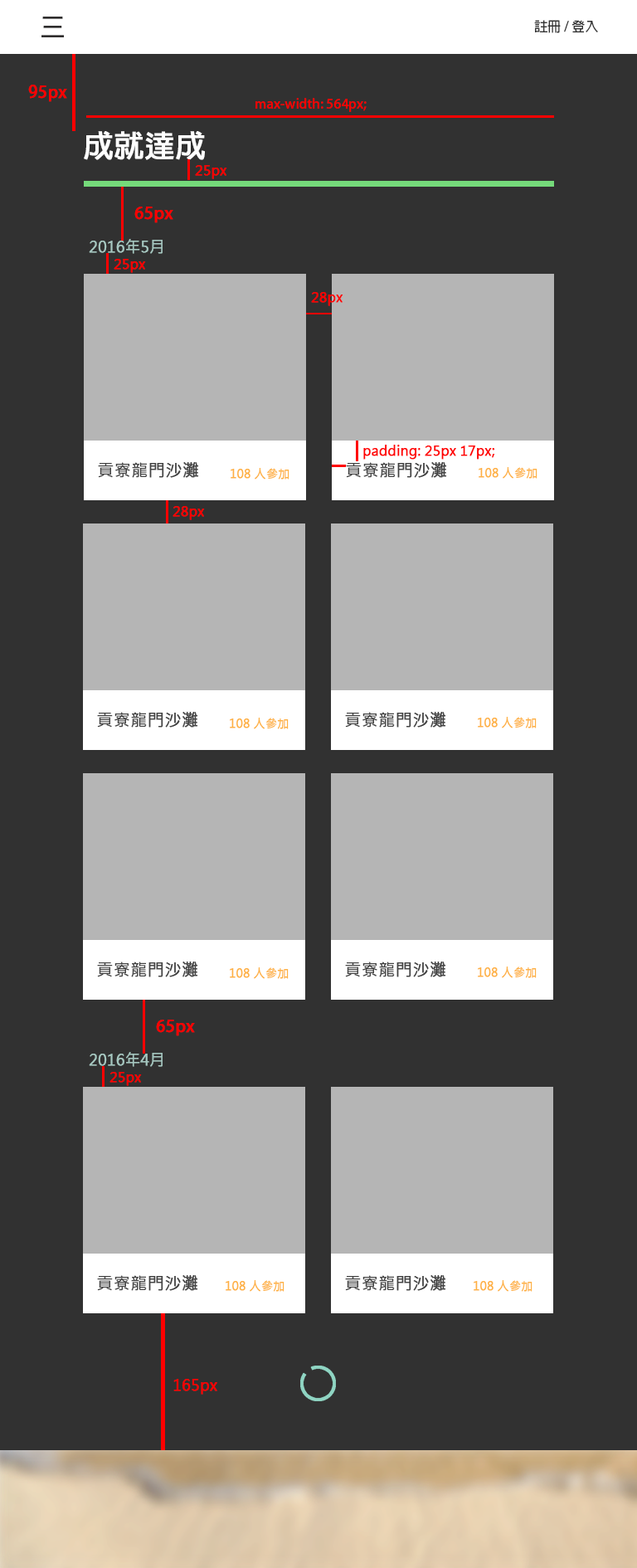
<style>
.page{position:relative;width:637px;height:1568px;background:#313131}
.page>*{position:absolute;margin:0}
.t1{font:24.9px "AdobeFanHeitiStd-Bold";color:#2e2c2c}
.t2{font:13.3px "AdobeFanHeitiStd-Bold";color:#333333}
.t3{font:16.6px "AdobeFanHeitiStd-Bold";color:#ff0000;font-weight:bold}
.t4{font:13.3px "AdobeFanHeitiStd-Bold";color:#ff0000}
.t5{font:29.9px "AdobeFanHeitiStd-Bold";color:#ffffff;font-weight:bold}
.t6{font:13.3px "MicrosoftJhengHeiRegular";color:#ff0000;font-weight:bold}
.t7{font:14.9px "MicrosoftJhengHeiRegular";color:#a6c7c0;font-weight:bold}
.t8{font:16.6px "MicrosoftJhengHeiRegular";color:#424242;font-weight:bold}
.t9{font:11.6px "MicrosoftJhengHeiRegular";color:#feb143;font-weight:bold}
.t10{font:14.9px "MicrosoftJhengHeiRegular";color:#ff0000;font-weight:bold}
</style>
<div class="page">
<p class="t1" style="left:41px;top:17px;width:23px;height:20px">三</p>
<p class="t2" style="left:534px;top:20px;width:64px;height:13px">註冊 / 登入</p>
<p class="t3" style="left:28px;top:85px;width:39px;height:17px">95px</p>
<p class="t4" style="left:256px;top:98px;width:111px;height:14px">max-width: 564px;</p>
<p class="t5" style="left:84px;top:131px;width:121px;height:29px">成就達成</p>
<p class="t6" style="left:195px;top:165px;width:32px;height:14px">25px</p>
<p class="t3" style="left:134px;top:207px;width:39px;height:16px">65px</p>
<p class="t7" style="left:89px;top:239px;width:74px;height:15px">2016年5月</p>
<p class="t6" style="left:114px;top:259px;width:32px;height:14px">25px</p>
<p class="t6" style="left:311px;top:292px;width:32px;height:14px">28px</p>
<p class="t6" style="left:363px;top:445px;width:132px;height:15px">padding: 25px 17px;</p>
<p class="t8" style="left:98px;top:462px;width:101px;height:16px">貢寮龍門沙灘</p>
<p class="t9" style="left:231px;top:468px;width:59px;height:12px">108 人參加</p>
<p class="t8" style="left:346px;top:462px;width:101px;height:16px">貢寮龍門沙灘</p>
<p class="t9" style="left:479px;top:467px;width:59px;height:12px">108 人參加</p>
<p class="t6" style="left:173px;top:506px;width:32px;height:14px">28px</p>
<p class="t8" style="left:97px;top:712px;width:101px;height:16px">貢寮龍門沙灘</p>
<p class="t8" style="left:345px;top:712px;width:101px;height:16px">貢寮龍門沙灘</p>
<p class="t9" style="left:230px;top:718px;width:59px;height:11px">108 人參加</p>
<p class="t9" style="left:478px;top:717px;width:59px;height:11px">108 人參加</p>
<p class="t8" style="left:97px;top:962px;width:101px;height:15px">貢寮龍門沙灘</p>
<p class="t8" style="left:345px;top:962px;width:101px;height:15px">貢寮龍門沙灘</p>
<p class="t9" style="left:230px;top:967px;width:59px;height:12px">108 人參加</p>
<p class="t9" style="left:478px;top:967px;width:59px;height:11px">108 人參加</p>
<p class="t3" style="left:156px;top:1020px;width:39px;height:16px">65px</p>
<p class="t7" style="left:89px;top:1052px;width:74px;height:15px">2016年4月</p>
<p class="t6" style="left:110px;top:1072px;width:32px;height:14px">25px</p>
<p class="t8" style="left:97px;top:1275px;width:101px;height:16px">貢寮龍門沙灘</p>
<p class="t8" style="left:345px;top:1275px;width:101px;height:16px">貢寮龍門沙灘</p>
<p class="t9" style="left:226px;top:1280px;width:59px;height:12px">108 人參加</p>
<p class="t9" style="left:474px;top:1280px;width:59px;height:12px">108 人參加</p>
<p class="t10" style="left:173px;top:1379px;width:44px;height:16px">165px</p>
</div>
